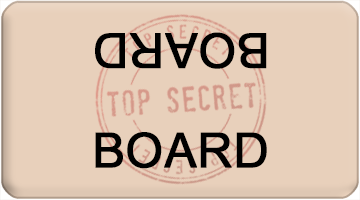
<style>
.page{position:relative;width:360px;height:200px;background:#e8d0bb}
.page>*{position:absolute;margin:0}
.t1{font:48px "ArialMT";color:#000000;font-weight:bold}
</style>
<div class="page">
<p class="t1" style="left:95px;top:32px;width:172px;height:37px;rotate:180deg">BOARD</p>
<p class="t1" style="left:95px;top:132px;width:172px;height:37px">BOARD</p>
</div>
